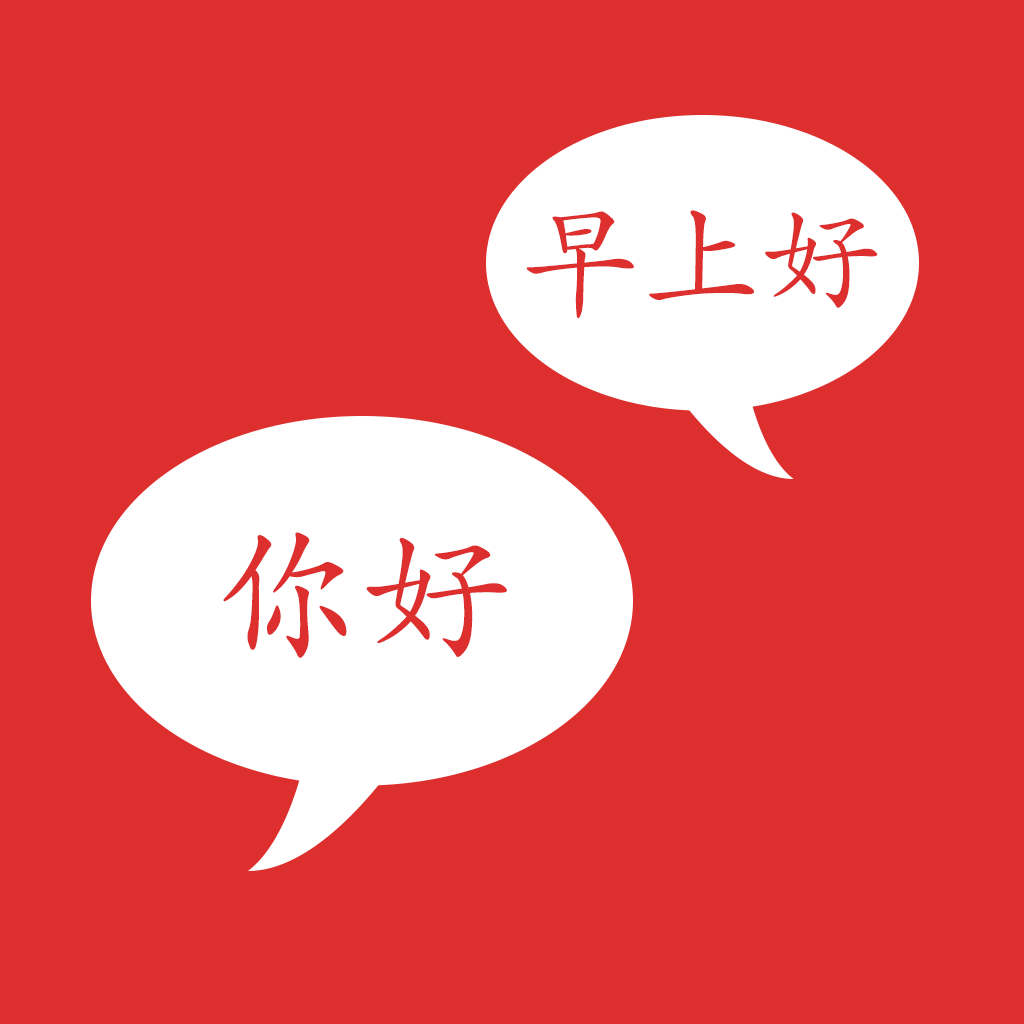
<style>
.page{position:relative;width:1024px;height:1024px;background:#de2f2f}
.page>*{position:absolute;margin:0}
.t1{font:120px "AdobeKaitiStd-Regular";color:#de2f2f}
.t2{font:150px "AdobeKaitiStd-Regular";color:#de2f2f}
</style>
<div class="page">
<p class="t1" style="left:526px;top:210px;width:352px;height:109px">早上好</p>
<p class="t2" style="left:223px;top:532px;width:284px;height:126px">你好</p>
</div>
